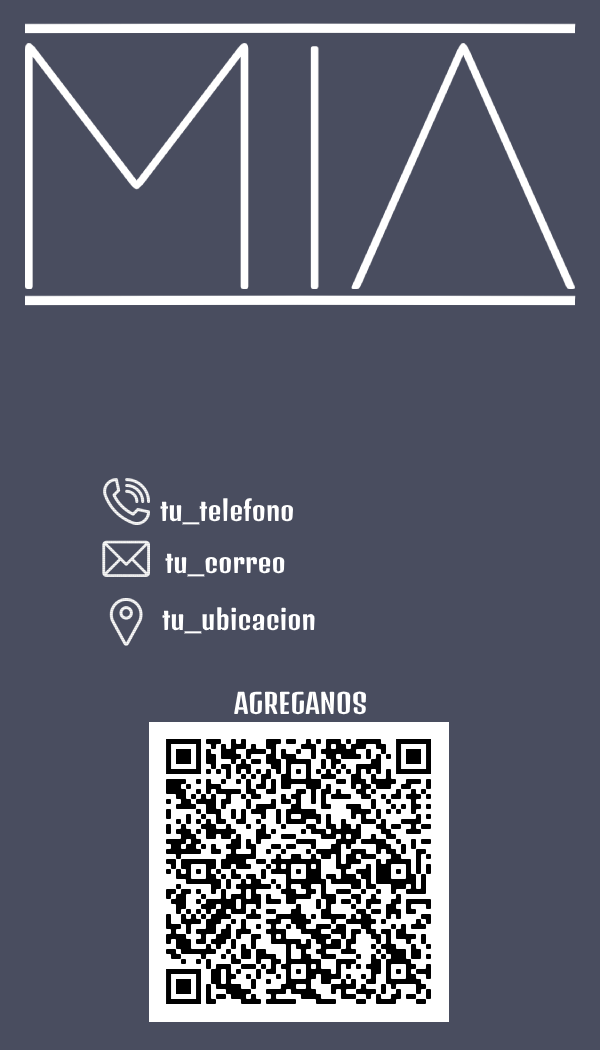
<style>
.page{position:relative;width:600px;height:1050px;background:#494d5f}
.page>*{position:absolute;margin:0}
.t1{font:27px "DenkOne-Regular";color:#ffffff}
</style>
<div class="page">
<p class="t1" style="left:160px;top:498px;width:133px;height:27px">tu_telefono</p>
<p class="t1" style="left:165px;top:553px;width:120px;height:24px">tu_correo</p>
<p class="t1" style="left:162px;top:607px;width:153px;height:27px">tu_ubicacion</p>
<p class="t1" style="left:234px;top:691px;width:132px;height:24px">AGREGANOS</p>
</div>
